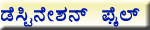
<style>
.page{position:relative;width:150px;height:30px}
.page>*{position:absolute;margin:0}
.t1{font:26px "Kuvempu_Eng_0001";color:#0019a8}
</style>
<div class="page">
<p class="t1" style="left:1px;top:7px;width:139px;height:20px">qÉ¹Ö£ÉÃ±À£ï ¥ÉÊó¯ï</p>
</div>
